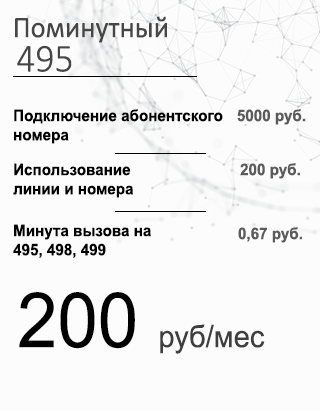
<style>
.page{position:relative;width:320px;height:410px;background:#fcfcfc}
.page>*{position:absolute;margin:0}
.t1{font:30px "Calibri";color:#464646;scale:0.95 1}
.t2{font:39.8px "Calibri-Light";color:#464646;scale:0.95 1}
.t3{font:16px "Arial-BoldMT";color:#000000;scale:0.95 1}
.t4{font:16px "Arial-BoldMT";color:#5c5b5b;scale:0.95 1}
.t5{font:30.6px "ArialMT";color:#3f3f3f;scale:0.95 1}
.t6{font:76.4px "ArialMT";color:#000000;scale:0.95 1}
</style>
<div class="page">
<p class="t1" style="left:15px;top:16px;width:152px;height:27px">Поминутный</p>
<p class="t2" style="left:17px;top:45px;width:55px;height:27px">495</p>
<p class="t3" style="left:14px;top:109px;width:209px;height:35px">Подключение абонентского<br>номера</p>
<p class="t4" style="left:237px;top:109px;width:69px;height:16px">5000 руб.</p>
<p class="t3" style="left:13px;top:163px;width:120px;height:35px">Использование<br>линии и номера</p>
<p class="t4" style="left:240px;top:163px;width:60px;height:16px">200 руб.</p>
<p class="t3" style="left:13px;top:224px;width:138px;height:34px">Минута вызова на<br>495, 498, 499</p>
<p class="t4" style="left:238px;top:227px;width:64px;height:16px">0,67 руб.</p>
<p class="t5" style="left:19px;top:292px;width:246px;height:62px"><span class="t6">200 </span>руб/мес</p>
</div>
